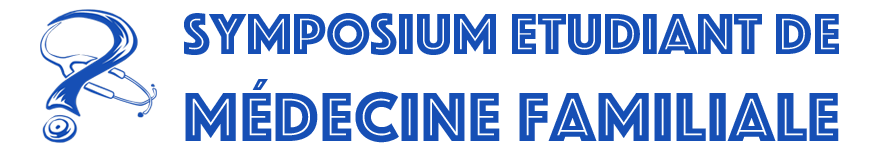
<style>
.page{position:relative;width:869px;height:155px;background:#ffffff}
.page>*{position:absolute;margin:0}
.t1{font:60px "Phosphate-Inline";color:#164fb5}
.t2{font:72px "Phosphate-Inline";letter-spacing:0.011em;color:#164fb5}
</style>
<div class="page">
<p class="t1" style="left:184px;top:13px;width:655px;height:42px">Symposium Etudiant de</p>
<p class="t2" style="left:185px;top:79px;width:654px;height:64px"><span class="t1"><br></span>Médecine Familiale</p>
</div>
